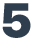
<style>
.page{position:relative;width:32px;height:40px;background:#2f3e4e}
.page>*{position:absolute;margin:0}
.t1{font:48px "SFProDisplay-Black";color:#2f3e4e}
</style>
<div class="page">
<p class="t1" style="left:2px;top:3px;width:29px;height:35px">5</p>
</div>
